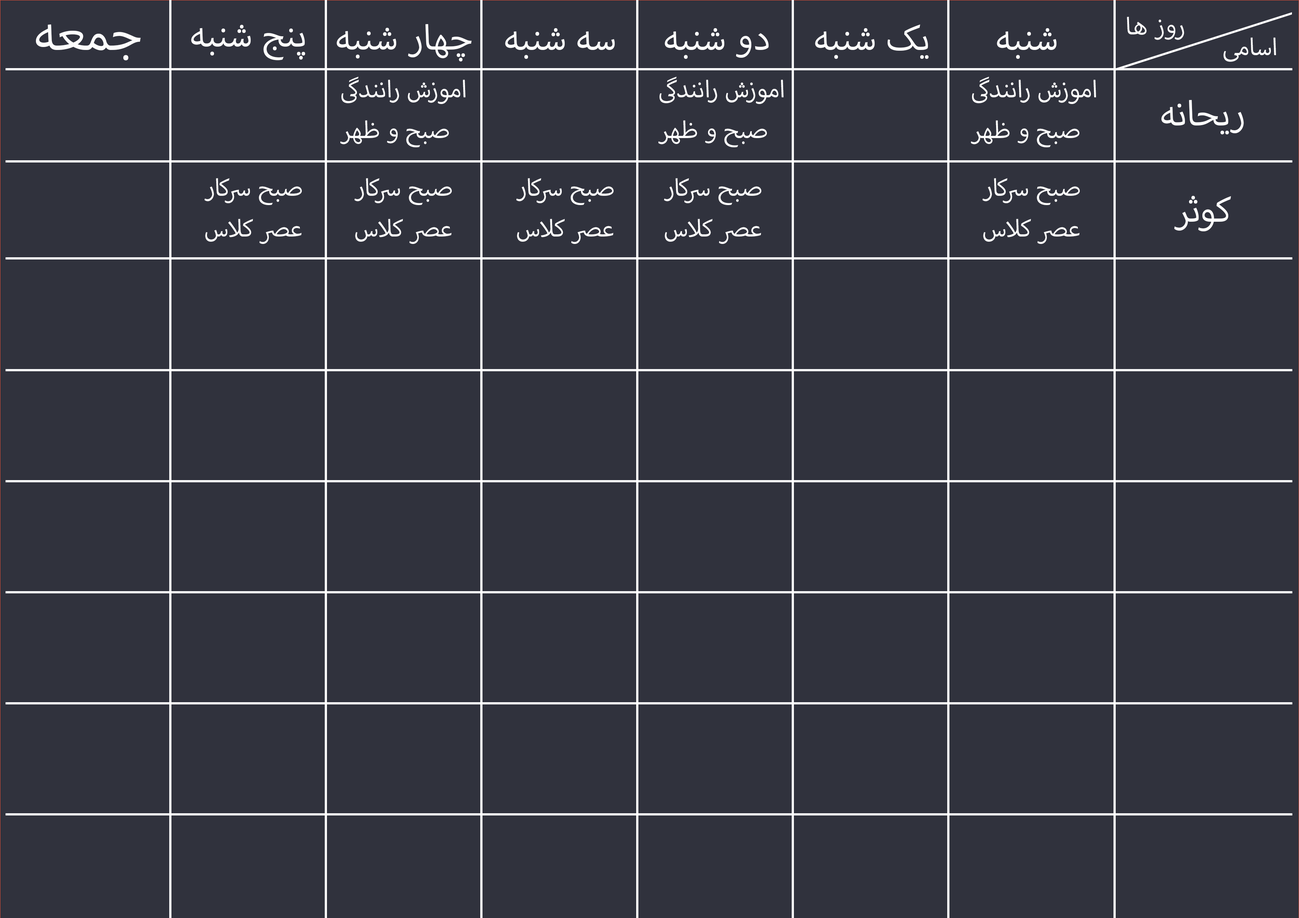
<style>
.page{position:relative;width:1299px;height:918px;background:#30323d}
.page>*{position:absolute;margin:0}
.t1{font:33.9px "MyriadArabic-Regular";color:#fdfdfd}
.t2{font:67.9px "MyriadArabic-Regular";color:#fdfdfd}
.t3{font:49.4px "MyriadArabic-Regular";color:#fdfdfd}
</style>
<div class="page">
<p class="t1" style="left:1127px;top:17px;width:57px;height:23px">روز ها</p>
<p class="t2" style="left:36px;top:24px;width:105px;height:36px">جمعه</p>
<p class="t3" style="left:191px;top:25px;width:114px;height:35px">پنج شنبه</p>
<p class="t3" style="left:337px;top:24px;width:135px;height:37px">چهار شنبه</p>
<p class="t3" style="left:505px;top:28px;width:110px;height:31px">سه شنبه</p>
<p class="t3" style="left:665px;top:28px;width:104px;height:31px">دو شنبه</p>
<p class="t3" style="left:815px;top:24px;width:114px;height:35px">یک شنبه</p>
<p class="t3" style="left:997px;top:28px;width:59px;height:31px">شنبه</p>
<p class="t1" style="left:1223px;top:37px;width:53px;height:25px">اسامی</p>
<p class="t1" style="left:340px;top:77px;width:125px;height:70px">اموزش رانندگی صبح و ظهر</p>
<p class="t1" style="left:658px;top:77px;width:125px;height:70px">اموزش رانندگی صبح و ظهر</p>
<p class="t1" style="left:971px;top:77px;width:125px;height:70px">اموزش رانندگی صبح و ظهر</p>
<p class="t3" style="left:1161px;top:100px;width:83px;height:34px">ریحانه</p>
<p class="t1" style="left:204px;top:178px;width:98px;height:66px">صبح سرکار<br>عصر کلاس</p>
<p class="t1" style="left:354px;top:178px;width:98px;height:66px">صبح سرکار<br>عصر کلاس</p>
<p class="t1" style="left:516px;top:178px;width:97px;height:66px">صبح سرکار<br>عصر کلاس</p>
<p class="t1" style="left:664px;top:178px;width:97px;height:66px">صبح سرکار<br>عصر کلاس</p>
<p class="t1" style="left:982px;top:178px;width:98px;height:66px">صبح سرکار<br>عصر کلاس</p>
<p class="t3" style="left:1174px;top:196px;width:57px;height:35px">کوثر</p>
</div>
